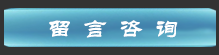
<style>
.page{position:relative;width:219px;height:55px;background:#333333}
.page>*{position:absolute;margin:0}
.t1{font:24px "STLiti";letter-spacing:0.5em;color:#ffffff}
</style>
<div class="page">
<p class="t1" style="left:49px;top:20px;width:129px;height:18px">留言咨询</p>
</div>
